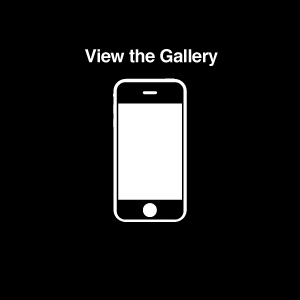
<style>
.page{position:relative;width:300px;height:300px;background:#000000}
.page>*{position:absolute;margin:0}
.t1{font:18px "Helvetica-Bold";letter-spacing:-0.02em;color:#ffffff}
</style>
<div class="page">
<p class="t1" style="left:85px;top:49px;width:133px;height:17px">View the Gallery</p>
</div>
